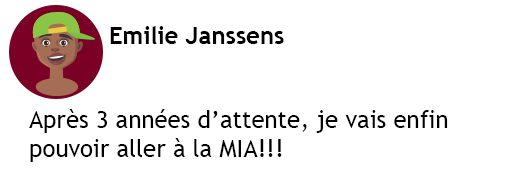
<style>
.page{position:relative;width:512px;height:188px;background:#ffffff}
.page>*{position:absolute;margin:0}
.t1{font:24px "TrebuchetMS-Bold";color:#000000}
.t2{font:24px "TrebuchetMS";color:#000000}
</style>
<div class="page">
<p class="t1" style="left:110px;top:26px;width:174px;height:18px">Emilie Janssens</p>
<p class="t2" style="left:29px;top:109px;width:419px;height:53px">Après 3 années d’attente, je vais enfin <br>pouvoir aller à la MIA!!!</p>
</div>
